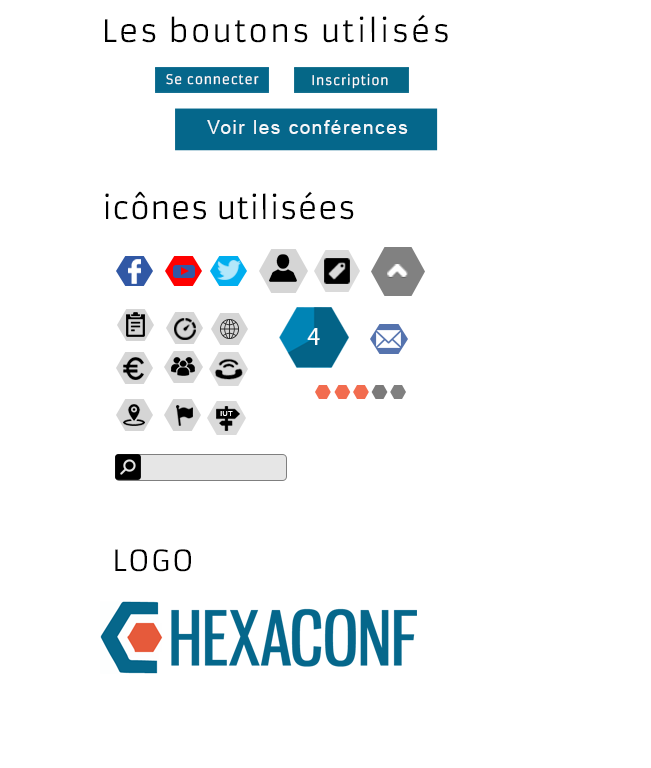
<style>
.page{position:relative;width:651px;height:768px;background:#ffffff}
.page>*{position:absolute;margin:0}
.t1{font:30.5px "Armata-Regular";letter-spacing:0.05em;color:#000000}
.t2{font:13px "Armata-Regular";letter-spacing:0.05em;color:#ffffff;scale:0.97 1}
.t3{font:19.3px "ArialMT";letter-spacing:0.075em;color:#f4f8fa}
.t4{font:30.5px "Armata-Regular";color:#000000}
.t5{font:26.3px "MyriadPro-Regular";color:#fcfdfd}
.t6{font:7.1px "ArialMT";letter-spacing:0.05em;color:#ffffff;scale:1.03 1}
.t7{font:28.9px "Armata-Regular";letter-spacing:0.05em;color:#010000}
</style>
<div class="page">
<p class="t1" style="left:105px;top:14px;width:343px;height:29px">Les boutons utilisés</p>
<p class="t2" style="left:166px;top:74px;width:93px;height:11px">Se connecter</p>
<p class="t2" style="left:312px;top:73px;width:76px;height:16px">Inscription</p>
<p class="t3" style="left:207px;top:120px;width:201px;height:14px">Voir les conférences</p>
<p class="t4" style="left:105px;top:191px;width:249px;height:29px">icônes utilisées</p>
<p class="t5" style="left:307px;top:328px;width:13px;height:17px">4</p>
<p class="t6" style="left:220px;top:411px;width:13px;height:5px">IUT</p>
<p class="t7" style="left:115px;top:549px;width:76px;height:23px">LOGO</p>
</div>
